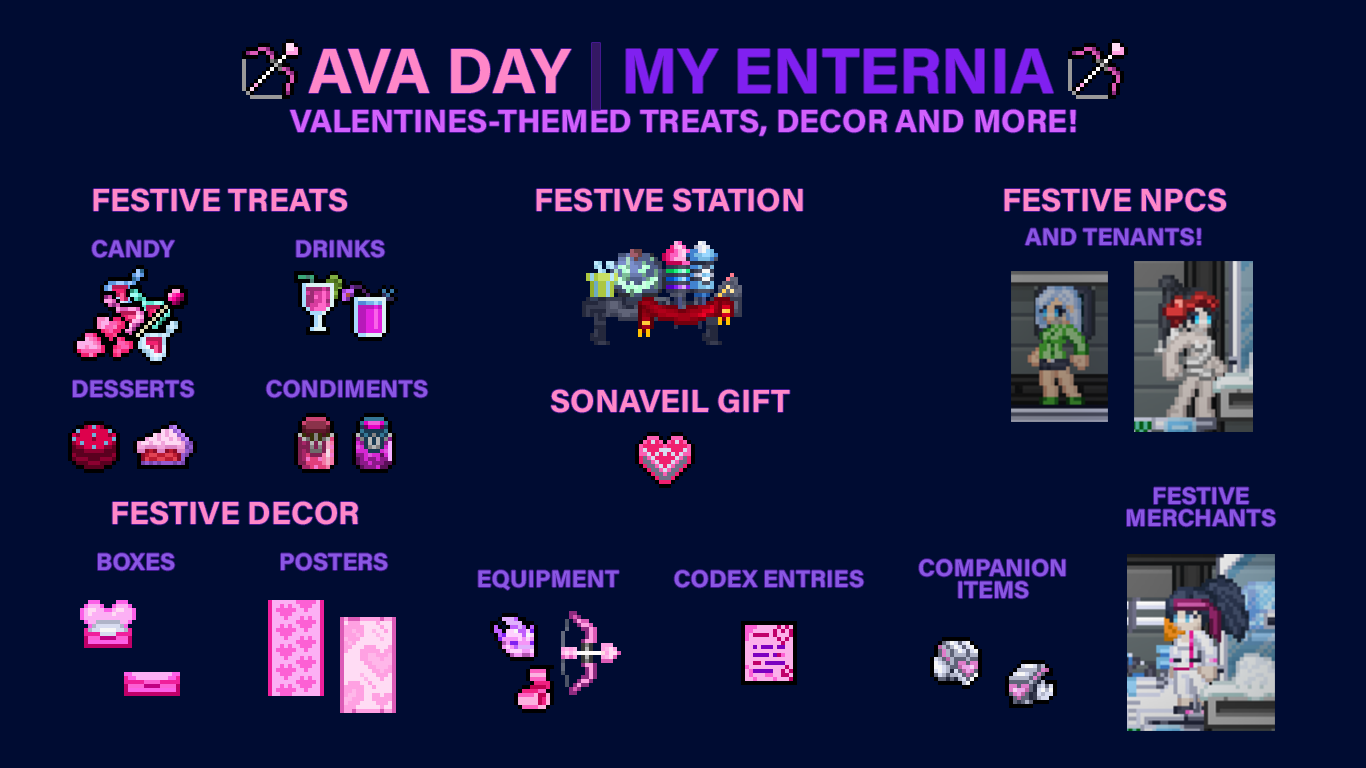
<style>
.page{position:relative;width:1366px;height:768px;background:#000c32}
.page>*{position:absolute;margin:0}
.t1{font:64px "AcuminConcept-Bold";color:#8020f0}
.t2{font:64px "AcuminConcept-Bold";color:#ff87c8}
.t3{font:64px "AcuminConcept-Bold";color:#341863}
.t4{font:32px "AcuminConcept-Bold";color:#d260fc}
.t5{font:32px "AcuminConcept-Bold";color:#ff87c8}
.t6{font:24px "AcuminConcept-Bold";color:#8a56e3}
.t7{font:24px/21.3px "AcuminConcept-Bold";color:#8a56e3}
</style>
<div class="page">
<p class="t1" style="left:308px;top:43px;width:746px;height:67px"><span class="t2">AVA DAY </span><span class="t3">| </span>MY ENTERNIA</p>
<p class="t4" style="left:290px;top:109px;width:786px;height:27px">VALENTINES-THEMED TREATS, DECOR AND MORE!</p>
<p class="t5" style="left:93px;top:188px;width:254px;height:24px">FESTIVE TREATS</p>
<p class="t5" style="left:536px;top:188px;width:267px;height:24px">FESTIVE STATION</p>
<p class="t5" style="left:1004px;top:188px;width:222px;height:24px">FESTIVE NPCS</p>
<p class="t6" style="left:1025px;top:228px;width:176px;height:18px">AND TENANTS!</p>
<p class="t6" style="left:92px;top:240px;width:83px;height:18px">CANDY</p>
<p class="t6" style="left:296px;top:240px;width:89px;height:18px">DRINKS</p>
<p class="t6" style="left:73px;top:380px;width:121px;height:18px">DESSERTS</p>
<p class="t6" style="left:266px;top:380px;width:162px;height:18px">CONDIMENTS</p>
<p class="t5" style="left:551px;top:389px;width:239px;height:24px">SONAVEIL GIFT</p>
<p class="t7" style="left:1127px;top:487px;width:149px;height:40px;text-align:center">FESTIVE<br>MERCHANTS</p>
<p class="t5" style="left:112px;top:501px;width:246px;height:24px">FESTIVE DECOR</p>
<p class="t6" style="left:98px;top:553px;width:77px;height:18px">BOXES</p>
<p class="t6" style="left:281px;top:553px;width:107px;height:18px">POSTERS</p>
<p class="t7" style="left:919px;top:559px;width:147px;height:40px;text-align:center">COMPANION<br>ITEMS</p>
<p class="t6" style="left:478px;top:570px;width:141px;height:20px">EQUIPMENT</p>
<p class="t6" style="left:674px;top:570px;width:190px;height:18px">CODEX ENTRIES</p>
</div>
